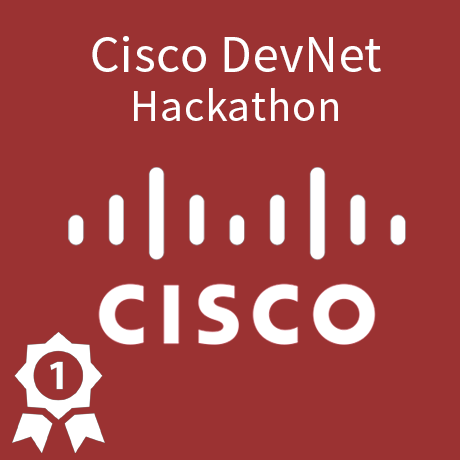
<style>
.page{position:relative;width:460px;height:460px;background:#9b3232}
.page>*{position:absolute;margin:0}
.t1{font:52px "SourceSansPro-Regular";letter-spacing:0.015em;color:#ffffff}
.t2{font:45px "SourceSansPro-Regular";letter-spacing:0.015em;color:#ffffff}
</style>
<div class="page">
<p class="t1" style="left:92px;top:36px;width:289px;height:36px">Cisco DevNet</p>
<p class="t2" style="left:134px;top:88px;width:204px;height:33px">Hackathon</p>
</div>
